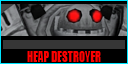
<style>
.page{position:relative;width:128px;height:64px;background:#000000}
.page>*{position:absolute;margin:0}
.t1{font:14px "Impact";color:#ff0000;scale:0.8 1}
</style>
<div class="page">
<p class="t1" style="left:27px;top:51px;width:74px;height:11px">HEAP DESTROYER</p>
</div>
